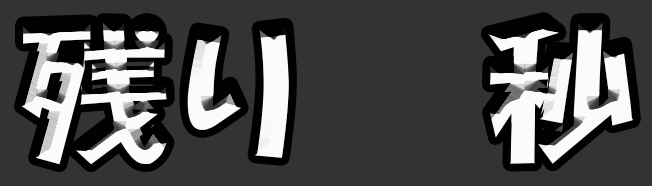
<style>
.page{position:relative;width:652px;height:186px;background:#333333}
.page>*{position:absolute;margin:0}
.t1{font:150px "HGPSoeiKakupoptai";letter-spacing:0.1em;color:#ffffff}
</style>
<div class="page">
<p class="t1" style="left:21px;top:20px;width:612px;height:145px">残り　 秒</p>
</div>
